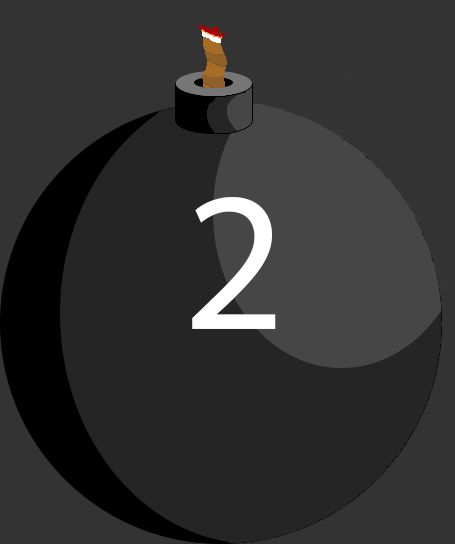
<style>
.page{position:relative;width:455px;height:544px;background:#333333}
.page>*{position:absolute;margin:0}
.t1{font:200px "MyriadPro-Regular";color:#ffffff}
</style>
<div class="page">
<p class="t1" style="left:192px;top:197px;width:84px;height:132px">2</p>
</div>
